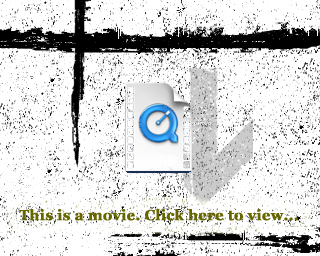
<style>
.page{position:relative;width:320px;height:256px;background:#ffffff}
.page>*{position:absolute;margin:0}
.t1{font:14.5px "Georgia-Bold";color:#666600;font-weight:bold}
</style>
<div class="page">
<p class="t1" style="left:19px;top:209px;width:279px;height:12px">This is a movie. Click here to view...</p>
</div>
